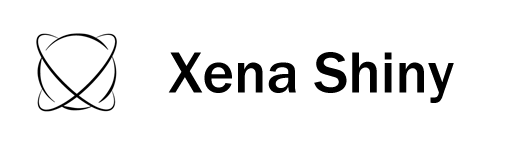
<style>
.page{position:relative;width:509px;height:144px;background:#ffffff}
.page>*{position:absolute;margin:0}
.t1{font:60px "FranklinGothic-Medium";color:#000000}
</style>
<div class="page">
<p class="t1" style="left:168px;top:52px;width:286px;height:51px">Xena Shiny</p>
</div>
